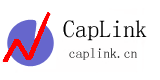
<style>
.page{position:relative;width:160px;height:80px;background:#ffffff}
.page>*{position:absolute;margin:0}
.t1{font:24px "Á¥Êé-Regular";color:#000000}
.t2{font:13.7px "Á¥Êé-Regular";color:#000000}
</style>
<div class="page">
<p class="t1" style="left:63px;top:20px;width:84px;height:21px">CapLink</p>
<p class="t2" style="left:69px;top:48px;width:68px;height:12px">caplink.cn</p>
</div>
